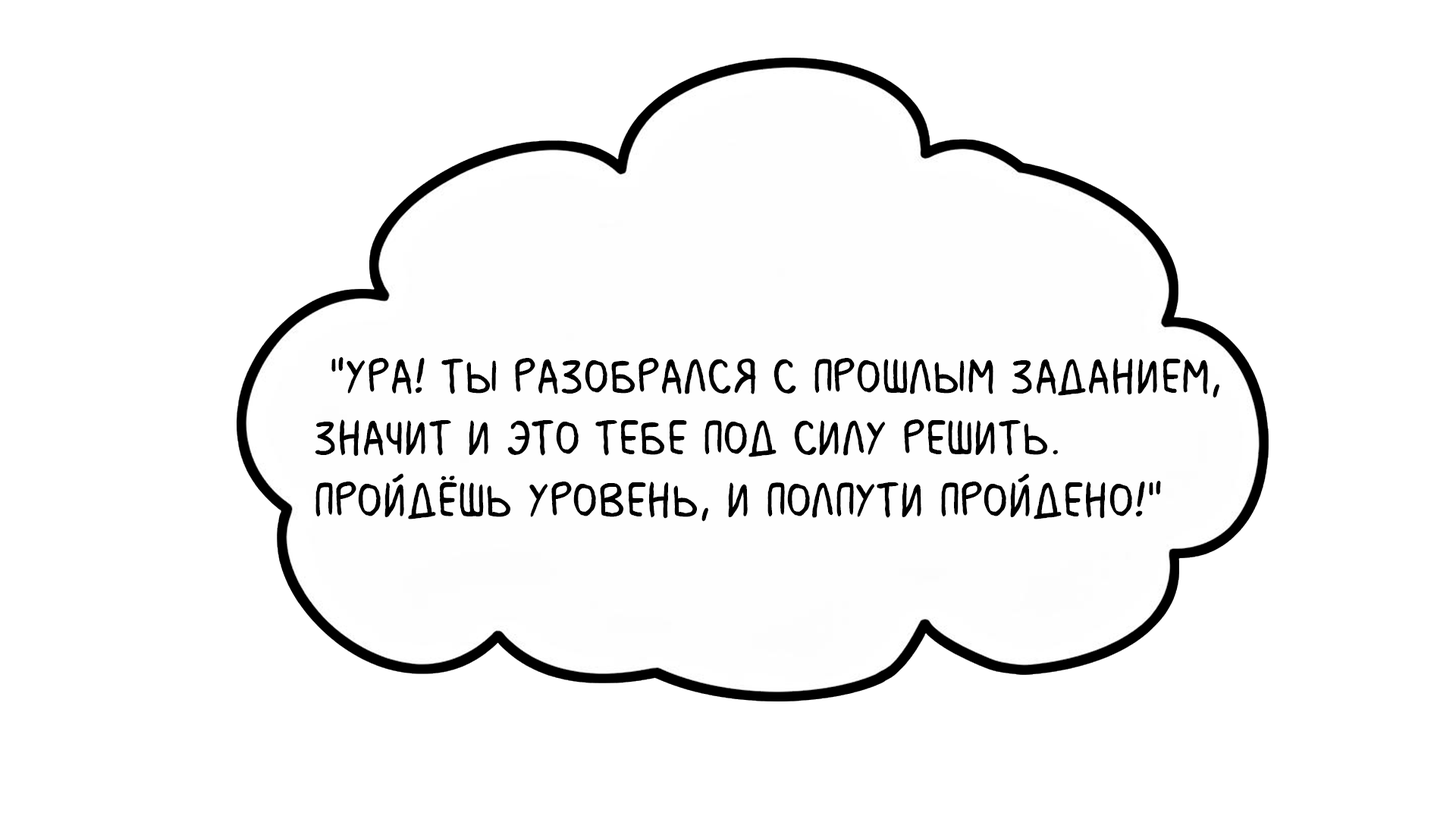
<style>
.page{position:relative;width:1456px;height:819px;background:#ffffff}
.page>*{position:absolute;margin:0}
.t1{font:51.6px "MilkMustacheBB";color:#000000}
</style>
<div class="page">
<p class="t1" style="left:315px;top:357px;width:904px;height:165px">"Ура! Ты разобрался с прошлым заданием, <br>значит и это тебе под силу решить. <br>Пройдёшь уровень, и полпути пройдено!"</p>
</div>
